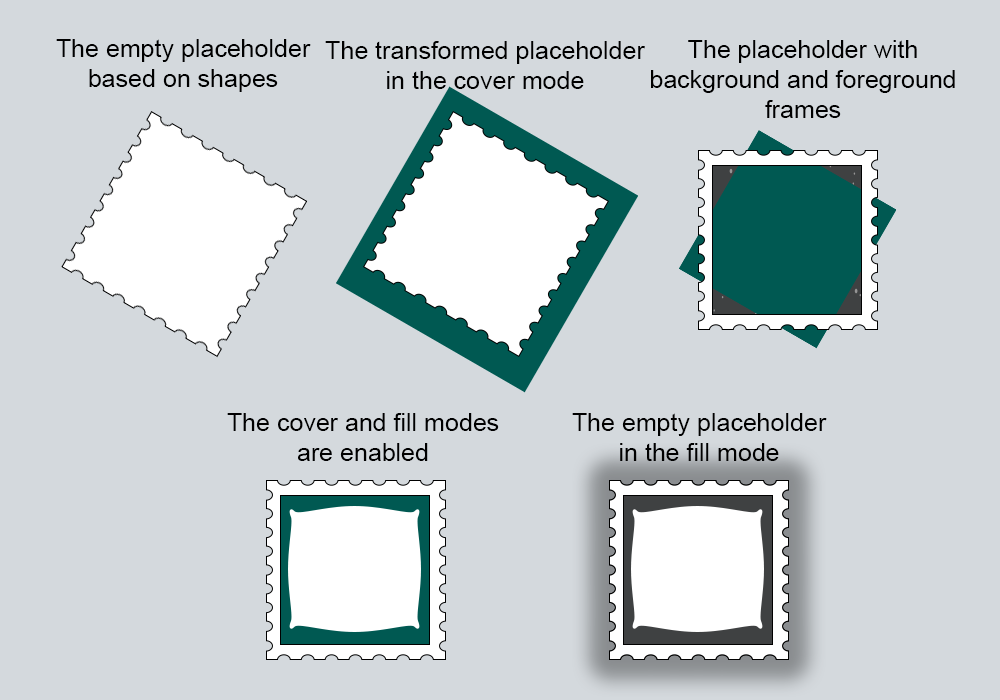
<style>
.page{position:relative;width:1000px;height:700px;background:#d4d9dd}
.page>*{position:absolute;margin:0}
.t1{font:25px "ArialMT";color:#000000}
</style>
<div class="page">
<p class="t1" style="left:56px;top:39px;width:255px;height:53px;text-align:center">The empty placeholder<br>based on shapes</p>
<p class="t1" style="left:325px;top:41px;width:320px;height:48px;text-align:center">The transformed placeholder<br>in the cover mode</p>
<p class="t1" style="left:651px;top:40px;width:304px;height:78px;text-align:center">The placeholder with<br>background and foreground<br>frames</p>
<p class="t1" style="left:227px;top:413px;width:272px;height:48px;text-align:center">The cover and fill modes<br>are enabled</p>
<p class="t1" style="left:572px;top:413px;width:255px;height:48px;text-align:center">The empty placeholder<br>in the fill mode</p>
</div>
